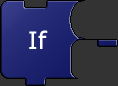
<style>
.page{position:relative;width:118px;height:86px;background:#333333}
.page>*{position:absolute;margin:0}
.t1{font:24px "Verdana";color:#ffffff}
</style>
<div class="page">
<p class="t1" style="left:29px;top:30px;width:19px;height:19px">If</p>
</div>
